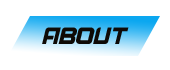
<style>
.page{position:relative;width:170px;height:70px;background:#ffffff}
.page>*{position:absolute;margin:0}
.t1{font:25px "Spantaran";color:#0e0a06}
</style>
<div class="page">
<p class="t1" style="left:42px;top:27px;width:87px;height:17px">ABOUT</p>
</div>
